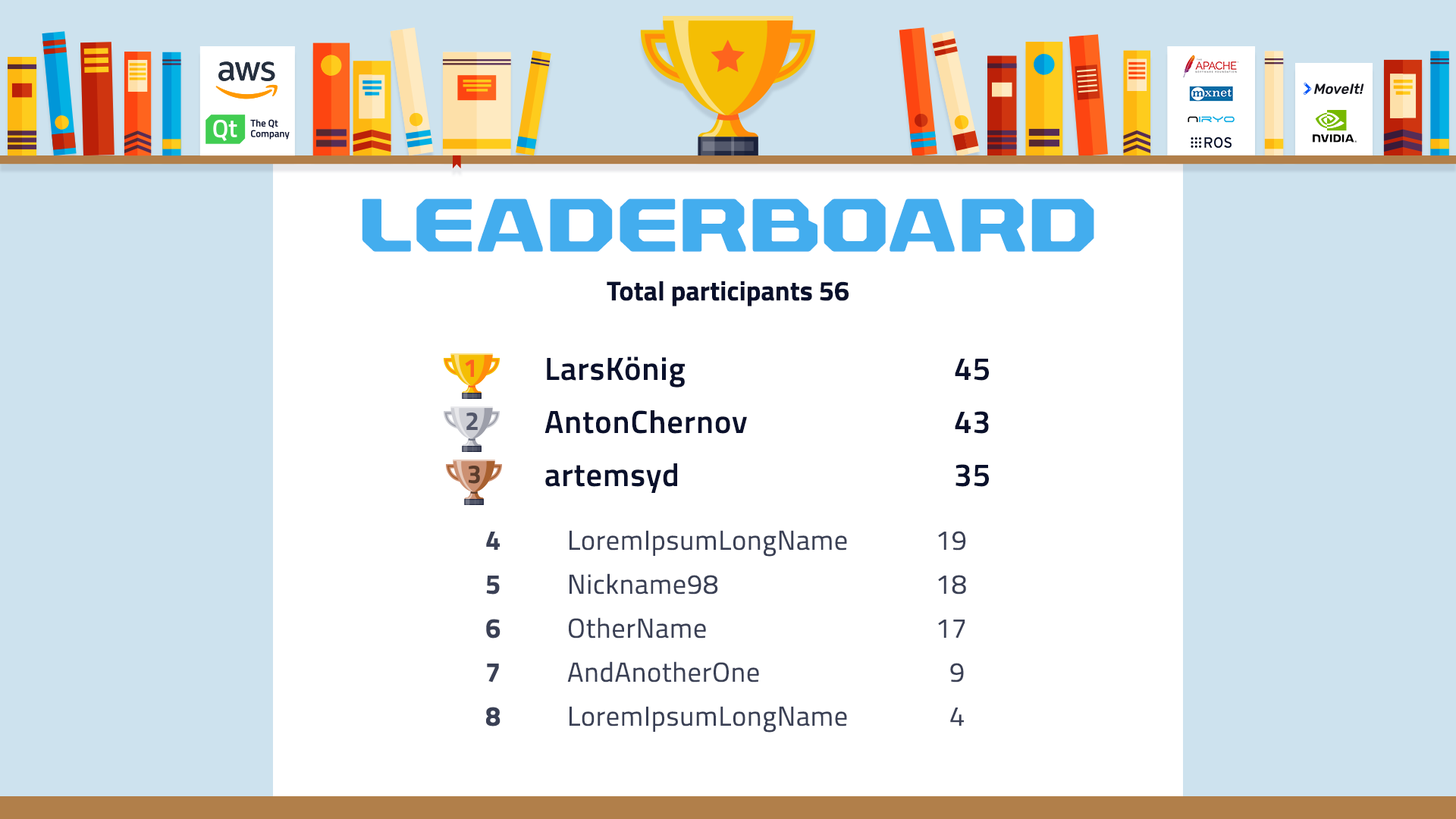
<style>
.page{position:relative;width:1456px;height:819px;background:#ffffff}
.page>*{position:absolute;margin:0}
.t1{font:75.8px "RexliaRg-Bold";letter-spacing:0.025em;color:#43adee;text-transform:uppercase}
.t2{font:27.3px "TitilliumWeb-Bold";color:#09102b}
.t3{font:31.8px/53.1px "TitilliumWeb-SemiBold";letter-spacing:0.025em;color:#09102b}
.t4{font:36.4px/53.1px "TitilliumWeb-SemiBold";letter-spacing:0.025em;color:#09102b}
.t5{font:27.3px/60.7px "TitilliumWeb-Regular";letter-spacing:0.025em;color:#3a4055}
.t6{font:27.3px/60.7px "TitilliumWeb-Bold";letter-spacing:0.025em;color:#3a4055}
.t7{font:27.3px/44px "TitilliumWeb-Bold";letter-spacing:0.025em;color:#3a4055}
.t8{font:27.3px/44px "TitilliumWeb-Regular";letter-spacing:0.025em;color:#3a4055}
</style>
<div class="page">
<p class="t1" style="left:362px;top:199px;width:732px;height:53px">LeaderBoard</p>
<p class="t2" style="left:607px;top:281px;width:242px;height:25px">Total participants 56</p>
<p class="t3" style="left:544px;top:356px;width:445px;height:137px"><span class="t4">   </span>LarsKönig          45<br>   AntonChernov        43<br>   artemsyd           35</p>
<p class="t5" style="left:486px;top:530px;width:480px;height:203px"><span class="t6">4</span>   LoremIpsumLongName     19<br><span class="t7">5</span><span class="t8">   Nickname98          18<br></span><span class="t7">6</span><span class="t8">   OtherName          17<br></span><span class="t7">7</span><span class="t8">   AndAnotherOne       9<br></span><span class="t7">8</span><span class="t8">   LoremIpsumLongName    4</span></p>
</div>
